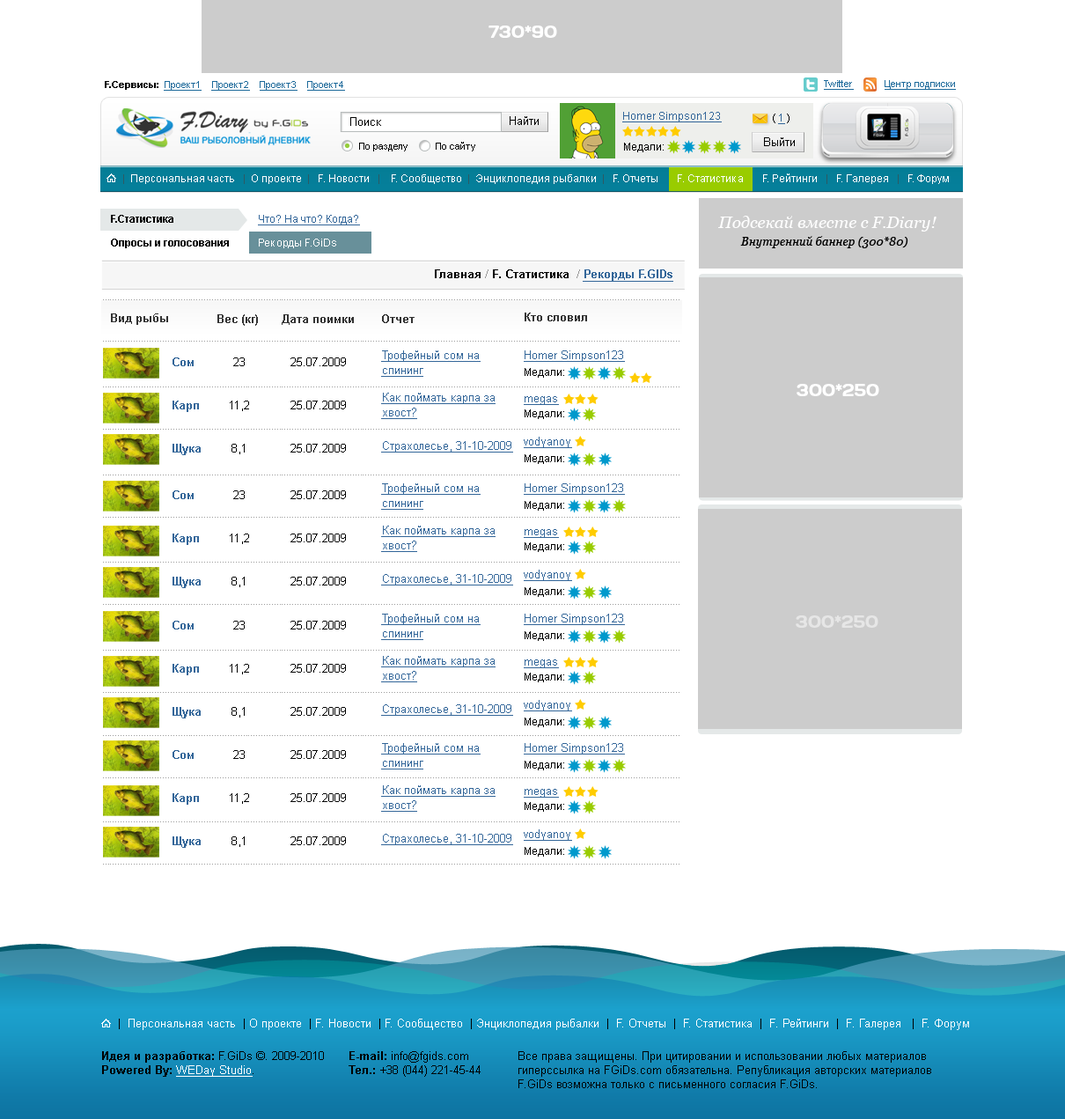
<style>
.page{position:relative;width:1065px;height:1119px;background:#ffffff}
.page>*{position:absolute;margin:0}
.t1{font:10.6px/23.8px "Arial-BoldMT";color:#000000}
.t2{font:11.4px "Arial-BoldMT";color:#336699;text-decoration:underline}
.t3{font:11.4px "Arial-BoldMT";color:#000000}
.t4{font:11.4px "Arial-BoldMT";color:#999999}
.t5{font:11.4px "Arial-BoldMT";color:#333333}
.t6{font:11.4px/15px "ArialMT";color:#336699;text-decoration:underline}
.t7{font:11.4px/43.1px "ArialMT";color:#336699;text-decoration:underline}
.t8{font:11.4px/43.1px "Arial-BoldMT";color:#336699}
.t9{font:11.4px/43.1px "ArialMT";color:#000000}
.t10{font:10.6px "ArialMT";color:#000000}
.t11{font:11.4px "ArialMT";color:#336699;text-decoration:underline}
.t12{font:11.4px "ArialMT";color:#ffffff}
.t13{font:11.4px "ArialMT";color:#000000}
.t14{font:11.4px "ArialMT";color:#ffffff;text-decoration:underline}
</style>
<div class="page">
<p class="t1" style="left:111px;top:215px;width:118px;height:33px">F.Статистика<br>Опросы и голосования</p>
<p class="t2" style="left:435px;top:269px;width:239px;height:13px"><span class="t3">Главная </span><span class="t4">/</span><span class="t3"> F. Статистика  </span><span class="t4">/ </span>Рекорды F.GIDs</p>
<p class="t5" style="left:111px;top:313px;width:57px;height:12px">Вид рыбы</p>
<p class="t5" style="left:217px;top:314px;width:41px;height:12px">Вес (кг)</p>
<p class="t5" style="left:282px;top:314px;width:72px;height:11px">Дата поимки</p>
<p class="t5" style="left:382px;top:314px;width:33px;height:9px">Отчет</p>
<p class="t5" style="left:525px;top:313px;width:62px;height:8px">Кто словил</p>
<p class="t6" style="left:381px;top:350px;width:100px;height:27px">Трофейный сом на<br>спининг</p>
<p class="t7" style="left:524px;top:350px;width:101px;height:98px">Homer Simpson123<br>megas<br>vodyanoy</p>
<p class="t8" style="left:173px;top:358px;width:28px;height:97px">Сом<br>Карп<br>Щука</p>
<p class="t9" style="left:230px;top:358px;width:19px;height:96px;text-align:center">23<br>11,2<br>8,1</p>
<p class="t9" style="left:291px;top:358px;width:55px;height:95px;text-align:center">25.07.2009<br>25.07.2009<br>25.07.2009</p>
<p class="t10" style="left:525px;top:368px;width:39px;height:10px">Медали:</p>
<p class="t6" style="left:381px;top:393px;width:115px;height:26px">Как поймать карпа за<br>хвост?</p>
<p class="t10" style="left:525px;top:409px;width:39px;height:10px">Медали:</p>
<p class="t11" style="left:381px;top:441px;width:132px;height:12px">Страхолесье, 31-10-2009</p>
<p class="t10" style="left:525px;top:454px;width:39px;height:10px">Медали:</p>
<p class="t6" style="left:381px;top:483px;width:100px;height:27px">Трофейный сом на<br>спининг</p>
<p class="t7" style="left:524px;top:483px;width:101px;height:98px">Homer Simpson123<br>megas<br>vodyanoy</p>
<p class="t8" style="left:173px;top:490px;width:28px;height:98px">Сом<br>Карп<br>Щука</p>
<p class="t9" style="left:230px;top:490px;width:19px;height:97px;text-align:center">23<br>11,2<br>8,1</p>
<p class="t9" style="left:291px;top:490px;width:55px;height:96px;text-align:center">25.07.2009<br>25.07.2009<br>25.07.2009</p>
<p class="t10" style="left:525px;top:501px;width:39px;height:10px">Медали:</p>
<p class="t6" style="left:381px;top:526px;width:115px;height:26px">Как поймать карпа за<br>хвост?</p>
<p class="t10" style="left:525px;top:542px;width:39px;height:10px">Медали:</p>
<p class="t11" style="left:381px;top:574px;width:132px;height:12px">Страхолесье, 31-10-2009</p>
<p class="t10" style="left:525px;top:587px;width:39px;height:10px">Медали:</p>
<p class="t6" style="left:381px;top:614px;width:100px;height:26px">Трофейный сом на<br>спининг</p>
<p class="t7" style="left:524px;top:614px;width:101px;height:97px">Homer Simpson123<br>megas<br>vodyanoy</p>
<p class="t8" style="left:173px;top:621px;width:28px;height:98px">Сом<br>Карп<br>Щука</p>
<p class="t9" style="left:230px;top:621px;width:19px;height:97px;text-align:center">23<br>11,2<br>8,1</p>
<p class="t9" style="left:291px;top:621px;width:55px;height:95px;text-align:center">25.07.2009<br>25.07.2009<br>25.07.2009</p>
<p class="t10" style="left:525px;top:631px;width:39px;height:10px">Медали:</p>
<p class="t6" style="left:381px;top:656px;width:115px;height:26px">Как поймать карпа за<br>хвост?</p>
<p class="t10" style="left:525px;top:673px;width:39px;height:9px">Медали:</p>
<p class="t11" style="left:381px;top:704px;width:132px;height:12px">Страхолесье, 31-10-2009</p>
<p class="t10" style="left:525px;top:718px;width:39px;height:9px">Медали:</p>
<p class="t6" style="left:381px;top:743px;width:100px;height:27px">Трофейный сом на<br>спининг</p>
<p class="t7" style="left:524px;top:743px;width:101px;height:98px">Homer Simpson123<br>megas<br>vodyanoy</p>
<p class="t8" style="left:173px;top:750px;width:28px;height:98px">Сом<br>Карп<br>Щука</p>
<p class="t9" style="left:230px;top:750px;width:19px;height:97px;text-align:center">23<br>11,2<br>8,1</p>
<p class="t9" style="left:291px;top:750px;width:55px;height:95px;text-align:center">25.07.2009<br>25.07.2009<br>25.07.2009</p>
<p class="t10" style="left:525px;top:761px;width:39px;height:9px">Медали:</p>
<p class="t6" style="left:381px;top:785px;width:115px;height:27px">Как поймать карпа за<br>хвост?</p>
<p class="t10" style="left:525px;top:802px;width:39px;height:10px">Медали:</p>
<p class="t11" style="left:381px;top:834px;width:132px;height:11px">Страхолесье, 31-10-2009</p>
<p class="t10" style="left:525px;top:847px;width:39px;height:10px">Медали:</p>
<p class="t12" style="left:119px;top:1019px;width:850px;height:11px"><span class="t13">|</span>  Персональная часть <span class="t13"> |</span> О проекте  <span class="t13">|</span> F. Новости  <span class="t13">|</span> F. Сообщество  <span class="t13">|</span> Энциклопедия рыбалки  <span class="t13">|</span>  F. Отчеты  <span class="t13">|</span>  F. Статистика  <span class="t13">|</span>  F. Рейтинги  <span class="t13">|</span>  F. Галерея   <span class="t13">|</span>  F. Форум</p>
<p class="t13" style="left:102px;top:1051px;width:222px;height:26px"><span class="t3">Идея и разработка:</span> F.GiDs ©. 2009-2010<br><span class="t3">Powered By: </span><span class="t14">WEDay Studio</span>.</p>
<p class="t13" style="left:349px;top:1051px;width:132px;height:26px"><span class="t3">E-mail: </span>info@fgids.com<br><span class="t3">Тел.:</span> +38 (044) 221-45-44</p>
<p class="t13" style="left:519px;top:1051px;width:413px;height:37px">Все права защищены. При цитировании и использовании любых материалов гиперссылка на FGiDs.com обязательна. Републикация авторских материалов F.GiDs возможна только с письменного согласия F.GiDs.</p>
</div>
